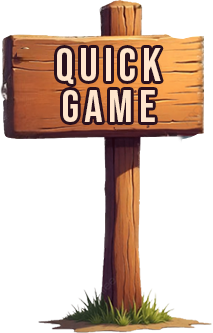
<style>
.page{position:relative;width:213px;height:333px;background:#ffffff}
.page>*{position:absolute;margin:0}
.t1{font:46px "BebasNeue-Regular";letter-spacing:0.13em;color:#ffe6cd}
.t2{font:45.6px "BebasNeue-Regular";letter-spacing:0.13em;color:#ffe6cd}
</style>
<div class="page">
<p class="t1" style="left:57px;top:48px;width:104px;height:36px">quick</p>
<p class="t2" style="left:63px;top:90px;width:92px;height:32px">Game</p>
</div>
